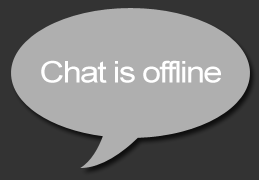
<style>
.page{position:relative;width:259px;height:180px;background:#afafaf}
.page>*{position:absolute;margin:0}
.t1{font:30px "ArialMT";letter-spacing:-0.05em;color:#ffffff;scale:1.14 1}
</style>
<div class="page">
<p class="t1" style="left:41px;top:60px;width:180px;height:23px">Chat is offline</p>
</div>
